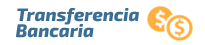
<style>
.page{position:relative;width:205px;height:45px;background:#ffffff}
.page>*{position:absolute;margin:0}
.t1{font:18px "Exo2.0-ExtraBoldItalic";color:#3a6e95}
</style>
<div class="page">
<p class="t1" style="left:17px;top:8px;width:122px;height:17px">Transferencia</p>
<p class="t1" style="left:16px;top:24px;width:78px;height:14px">Bancaria</p>
</div>
